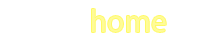
<style>
.page{position:relative;width:203px;height:42px;background:#ffffff}
.page>*{position:absolute;margin:0}
.t1{font:31.5px "MyriadPro-Regular";color:#fffb98}
</style>
<div class="page">
<p class="t1" style="left:92px;top:9px;width:74px;height:23px">home</p>
</div>
